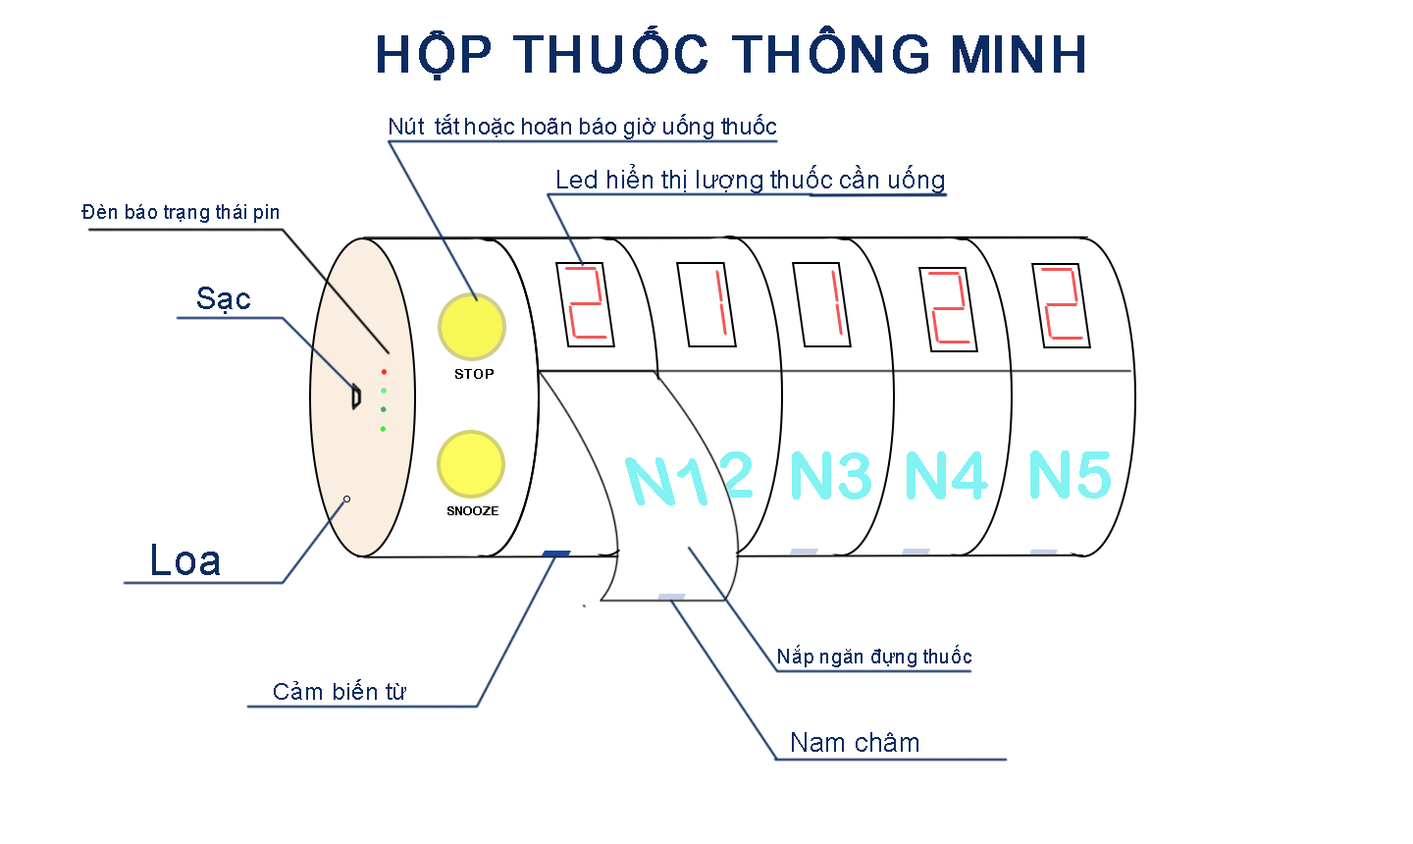
<style>
.page{position:relative;width:1413px;height:844px;background:#ffffff}
.page>*{position:absolute;margin:0}
.t1{font:50.4px "ArialMT";color:#0c2c61;font-weight:bold}
.t2{font:22.5px "ArialMT";color:#0c2c61}
.t3{font:25.1px "ArialMT";color:#0c2c61}
.t4{font:19.9px "ArialMT";color:#0c2c61}
.t5{font:31.5px "ArialMT";color:#0c2c61}
.t6{font:14px "ArialRoundedMTBold";color:#000000}
.t7{font:67.7px "ArialRoundedMTBold";color:#82f2f3;scale:0.96 1}
.t8{font:65.2px "ArialRoundedMTBold";color:#82f2f3}
.t9{font:11.8px "ArialRoundedMTBold";color:#000000}
.t10{font:43.1px "ArialMT";color:#0c2c61}
.t11{font:19.7px "ArialMT";color:#0c2c61}
.t12{font:23.8px "ArialMT";color:#0c2c61}
.t13{font:26px "ArialMT";color:#0c2c61}
</style>
<div class="page">
<p class="t1" style="left:378px;top:26px;width:706px;height:54px">HỘP THUỐC THÔNG MINH</p>
<p class="t2" style="left:390px;top:114px;width:386px;height:25px">Nút  tắt hoặc hoãn báo giờ uống thuốc</p>
<p class="t3" style="left:557px;top:164px;width:387px;height:29px">Led hiển thị lượng thuốc cần uống</p>
<p class="t4" style="left:81px;top:204px;width:198px;height:19px">Đèn báo trạng thái pin</p>
<p class="t5" style="left:197px;top:287px;width:53px;height:27px">Sạc</p>
<p class="t6" style="left:455px;top:369px;width:39px;height:10px">STOP</p>
<p class="t7" style="left:625px;top:457px;width:82px;height:48px">N1</p>
<p class="t8" style="left:792px;top:451px;width:79px;height:48px">N3</p>
<p class="t8" style="left:907px;top:451px;width:81px;height:48px">N4</p>
<p class="t8" style="left:1030px;top:450px;width:81px;height:48px">N5</p>
<p class="t9" style="left:447px;top:506px;width:51px;height:9px">SNOOZE</p>
<p class="t10" style="left:152px;top:544px;width:68px;height:31px">Loa</p>
<p class="t11" style="left:778px;top:645px;width:193px;height:22px">Nắp ngăn đựng thuốc</p>
<p class="t12" style="left:274px;top:679px;width:132px;height:21px">Cảm biến từ</p>
<p class="t13" style="left:792px;top:732px;width:126px;height:20px">Nam châm</p>
</div>
